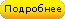
<style>
.page{position:relative;width:65px;height:19px}
.page>*{position:absolute;margin:0}
.t1{font:10px "Tahoma";letter-spacing:0.04em;color:#000000}
</style>
<div class="page">
<p class="t1" style="left:5px;top:4px;width:56px;height:10px">Подробнее</p>
</div>
